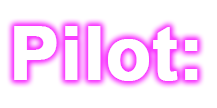
<style>
.page{position:relative;width:217px;height:108px;background:#ffffff}
.page>*{position:absolute;margin:0}
.t1{font:73.3px "Arial-BoldMT";color:#ffffff;font-weight:bold}
</style>
<div class="page">
<p class="t1" style="left:14px;top:26px;width:184px;height:55px">Pilot:</p>
</div>
